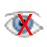
<style>
.page{position:relative;width:47px;height:47px;background:#ffffff}
.page>*{position:absolute;margin:0}
.t1{font:30px "MyriadPro-Regular";color:#fb0303}
</style>
<div class="page">
<p class="t1" style="left:17px;top:14px;width:16px;height:21px">X</p>
</div>
